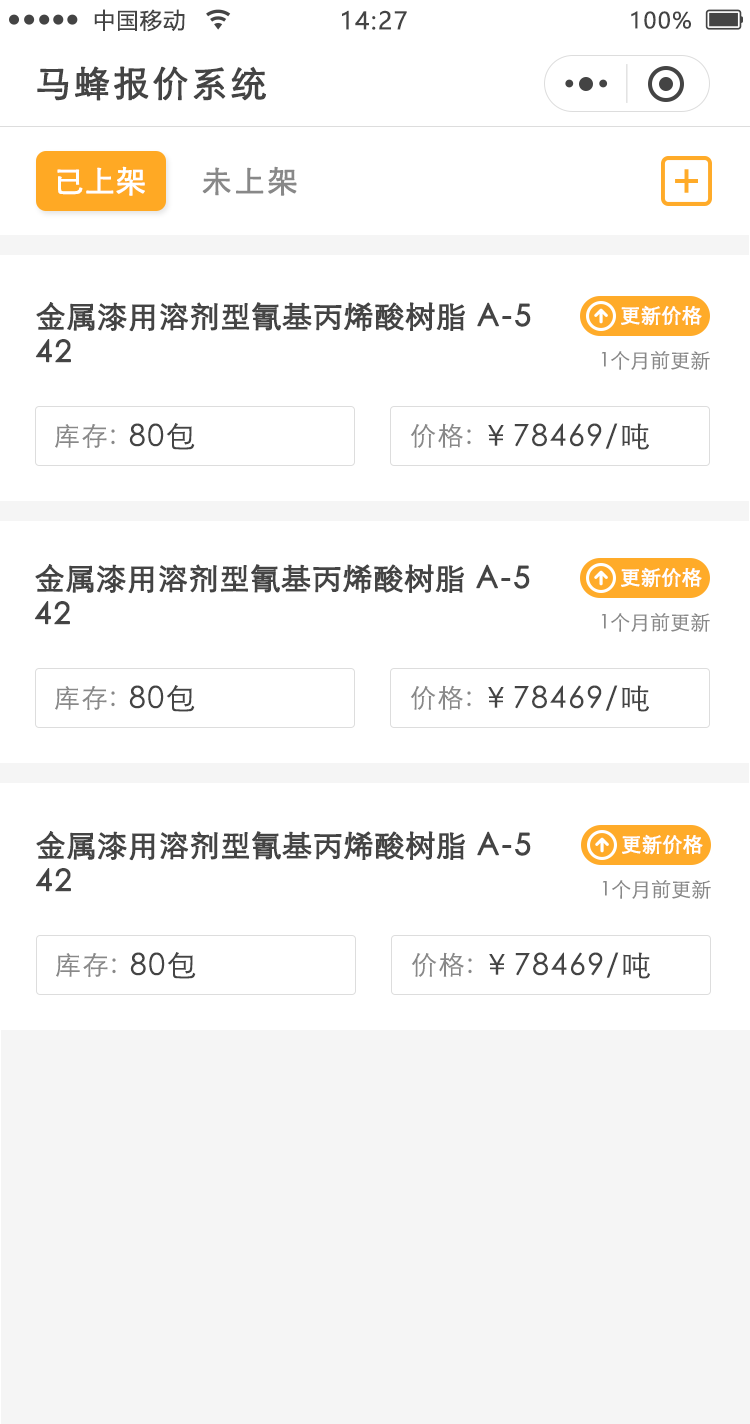
<style>
.page{position:relative;width:750px;height:1424px;background:#ffffff}
.page>*{position:absolute;margin:0}
.t1{font:22px "MicrosoftYaHei";letter-spacing:0.06em;color:#444444}
.t2{font:24px "MicrosoftYaHei";letter-spacing:0.06em;color:#444444}
.t3{font:36px "STXihei";letter-spacing:0.06em;color:#444444;font-weight:bold}
.t4{font:30px "STXihei";color:#ffffff;font-weight:bold}
.t5{font:30px "STXihei";letter-spacing:0.06em;color:#888888;font-weight:bold}
.t6{font:30px/36px "STXihei";color:#444444;font-weight:bold}
.t7{font:30px/36px "STXihei";letter-spacing:0.06em;color:#444444;font-weight:bold}
.t8{font:20px "STXihei";color:#ffffff;font-weight:bold}
.t9{font:20px "STXihei";color:#888888}
.t10{font:26px "STXihei";letter-spacing:0.06em;color:#888888}
.t11{font:30px "STXihei";letter-spacing:0.06em;color:#444444}
</style>
<div class="page">
<p class="t1" style="left:94px;top:9px;width:91px;height:23px">中国移动</p>
<p class="t2" style="left:342px;top:10px;width:65px;height:20px">14:27</p>
<p class="t1" style="left:631px;top:11px;width:60px;height:18px">100%</p>
<p class="t3" style="left:37px;top:66px;width:229px;height:35px">马蜂报价系统</p>
<p class="t4" style="left:57px;top:166px;width:88px;height:30px">已上架</p>
<p class="t5" style="left:202px;top:166px;width:95px;height:30px">未上架</p>
<p class="t6" style="left:35px;top:302px;width:496px;height:61px">金属漆用溶剂型氰基丙烯酸树脂<span class="t7"> A-5<br>42</span></p>
<p class="t8" style="left:621px;top:305px;width:81px;height:21px">更新价格</p>
<p class="t9" style="left:601px;top:351px;width:109px;height:19px">1个月前更新</p>
<p class="t10" style="left:55px;top:424px;width:60px;height:24px">库存:</p>
<p class="t11" style="left:129px;top:423px;width:66px;height:27px">80包</p>
<p class="t10" style="left:410px;top:423px;width:61px;height:25px">价格:</p>
<p class="t11" style="left:488px;top:423px;width:161px;height:27px">￥78469/吨</p>
<p class="t6" style="left:34px;top:564px;width:496px;height:61px">金属漆用溶剂型氰基丙烯酸树脂<span class="t7"> A-5<br>42</span></p>
<p class="t8" style="left:621px;top:567px;width:81px;height:21px">更新价格</p>
<p class="t9" style="left:601px;top:613px;width:109px;height:19px">1个月前更新</p>
<p class="t10" style="left:55px;top:686px;width:60px;height:24px">库存:</p>
<p class="t11" style="left:129px;top:685px;width:66px;height:27px">80包</p>
<p class="t10" style="left:410px;top:685px;width:61px;height:25px">价格:</p>
<p class="t11" style="left:488px;top:685px;width:161px;height:27px">￥78469/吨</p>
<p class="t6" style="left:35px;top:831px;width:496px;height:61px">金属漆用溶剂型氰基丙烯酸树脂<span class="t7"> A-5<br>42</span></p>
<p class="t8" style="left:622px;top:834px;width:81px;height:21px">更新价格</p>
<p class="t9" style="left:602px;top:880px;width:109px;height:19px">1个月前更新</p>
<p class="t10" style="left:56px;top:953px;width:60px;height:24px">库存:</p>
<p class="t11" style="left:130px;top:952px;width:66px;height:27px">80包</p>
<p class="t10" style="left:411px;top:952px;width:61px;height:25px">价格:</p>
<p class="t11" style="left:489px;top:952px;width:161px;height:27px">￥78469/吨</p>
</div>
